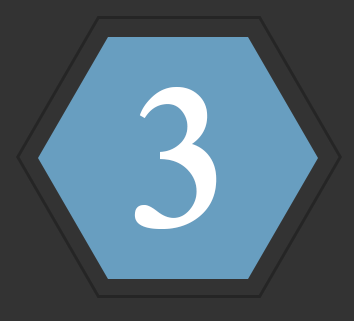
<style>
.page{position:relative;width:354px;height:321px;background:#333333}
.page>*{position:absolute;margin:0}
.t1{font:280px "Rod";color:#ffffff}
</style>
<div class="page">
<p class="t1" style="left:134px;top:86px;width:83px;height:143px">3</p>
</div>
